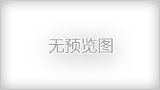
<style>
.page{position:relative;width:160px;height:90px;background:#ffffff}
.page>*{position:absolute;margin:0}
.t1{font:16px "MicrosoftYaHeiLight";color:#a0a0a0;font-weight:bold}
</style>
<div class="page">
<p class="t1" style="left:48px;top:37px;width:65px;height:17px">无预览图</p>
</div>
